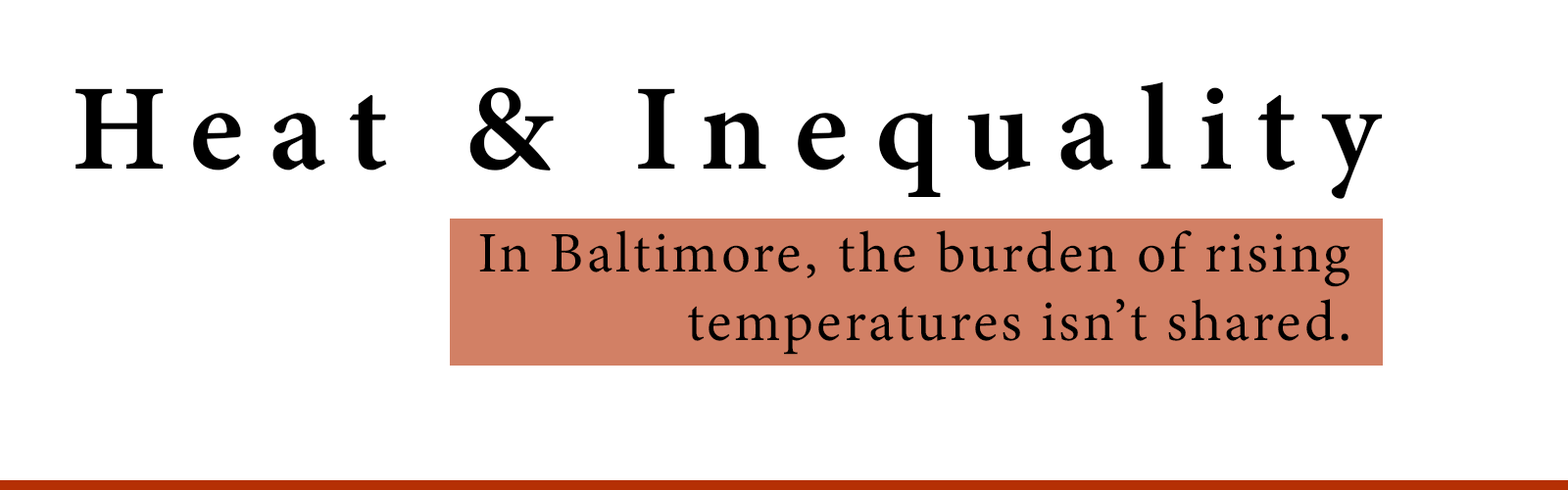
<style>
.page{position:relative;width:1568px;height:490px;background:#ffffff}
.page>*{position:absolute;margin:0}
.t1{font:122.5px "MinionConceptRoman_620.000wght";letter-spacing:0.2em;color:#000000}
.t2{font:57.2px "MinionVariableConcept-Roman";letter-spacing:0.05em;color:#000000}
</style>
<div class="page">
<p class="t1" style="left:75px;top:81px;width:1308px;height:118px">Heat &amp; Inequality</p>
<p class="t2" style="left:479px;top:230px;width:871px;height:125px">In Baltimore, the burden of rising <br>             temperatures isn’t shared.</p>
</div>
